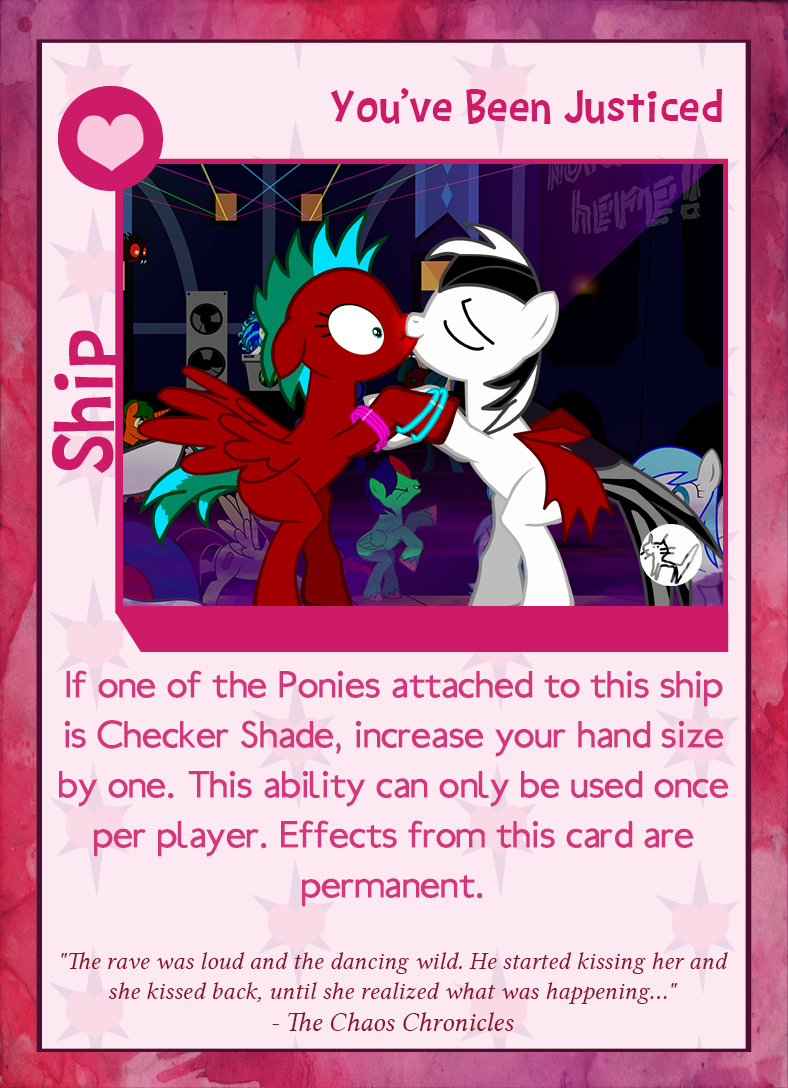
<style>
.page{position:relative;width:788px;height:1088px;background:#fde9f1}
.page>*{position:absolute;margin:0}
.t1{font:50px "BarthowheelRegular";color:#ce1b69}
.t2{font:41.7px "Ubahn";color:#d4377b}
.t3{font:25px "LinLibertineI";color:#89162f}
.t4{font:27.1px "LinLibertineI";color:#89162f}
</style>
<div class="page">
<p class="t1" style="left:330px;top:88px;width:393px;height:36px">You’ve Been Justiced</p>
<p class="t2" style="left:59px;top:670px;width:670px;height:237px;text-align:center">If one of the Ponies attached to this ship<br>is Checker Shade, increase your hand size<br>by one. This ability can only be used once<br>per player. Effects from this card are<br>permanent.</p>
<p class="t3" style="left:61px;top:952px;width:667px;height:79px;text-align:center">"The rave was loud and the dancing wild. He started kissing her and<br>she kissed back, until she realized what was happening..."<br>- <span class="t4">The Chaos Chronicles</span></p>
</div>
